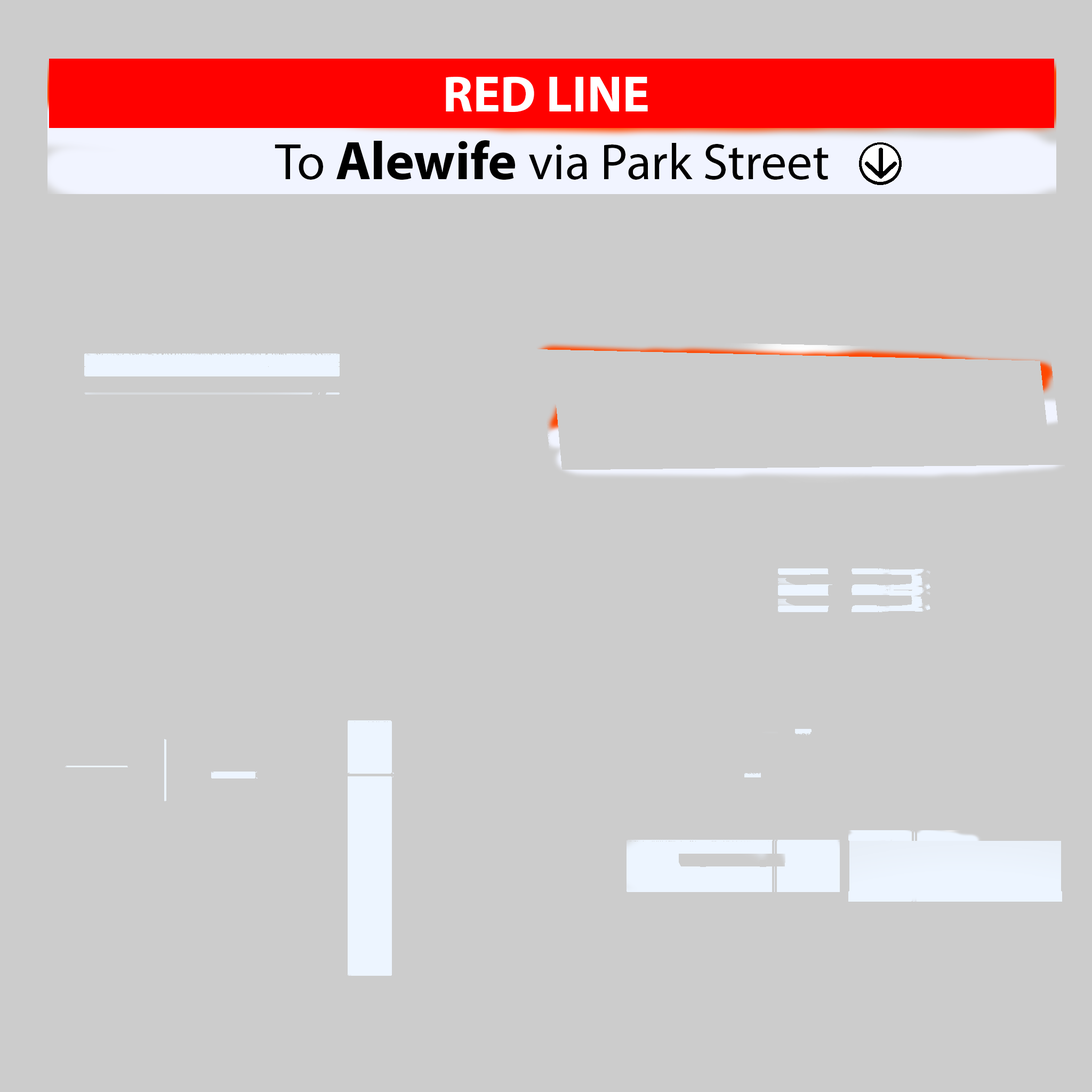
<style>
.page{position:relative;width:1092px;height:1092px;background:#cccccc}
.page>*{position:absolute;margin:0}
.t1{font:51.2px "MyriadPro-Bold";color:#ffffff}
.t2{font:51.2px "MyriadPro-Regular";color:#000000}
.t3{font:54.4px "MyriadPro-Bold";color:#000000}
</style>
<div class="page">
<p class="t1" style="left:446px;top:77px;width:202px;height:35px">RED LINE</p>
<p class="t2" style="left:275px;top:140px;width:554px;height:40px">To <span class="t3">Alewife </span>via Park Street</p>
</div>
